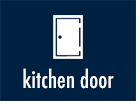
<style>
.page{position:relative;width:140px;height:104px;background:#002041}
.page>*{position:absolute;margin:0}
.t1{font:23.3px "Futura-CondensedMedium";color:#ffffff}
</style>
<div class="page">
<p class="t1" style="left:23px;top:68px;width:91px;height:21px">kitchen door</p>
</div>
